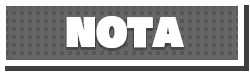
<style>
.page{position:relative;width:250px;height:72px;background:#676767}
.page>*{position:absolute;margin:0}
.t1{font:36px "RaglanPunchStd-UB";letter-spacing:-0.011em;color:#ffffff}
</style>
<div class="page">
<p class="t1" style="left:66px;top:16px;width:118px;height:32px">NOTA</p>
</div>
